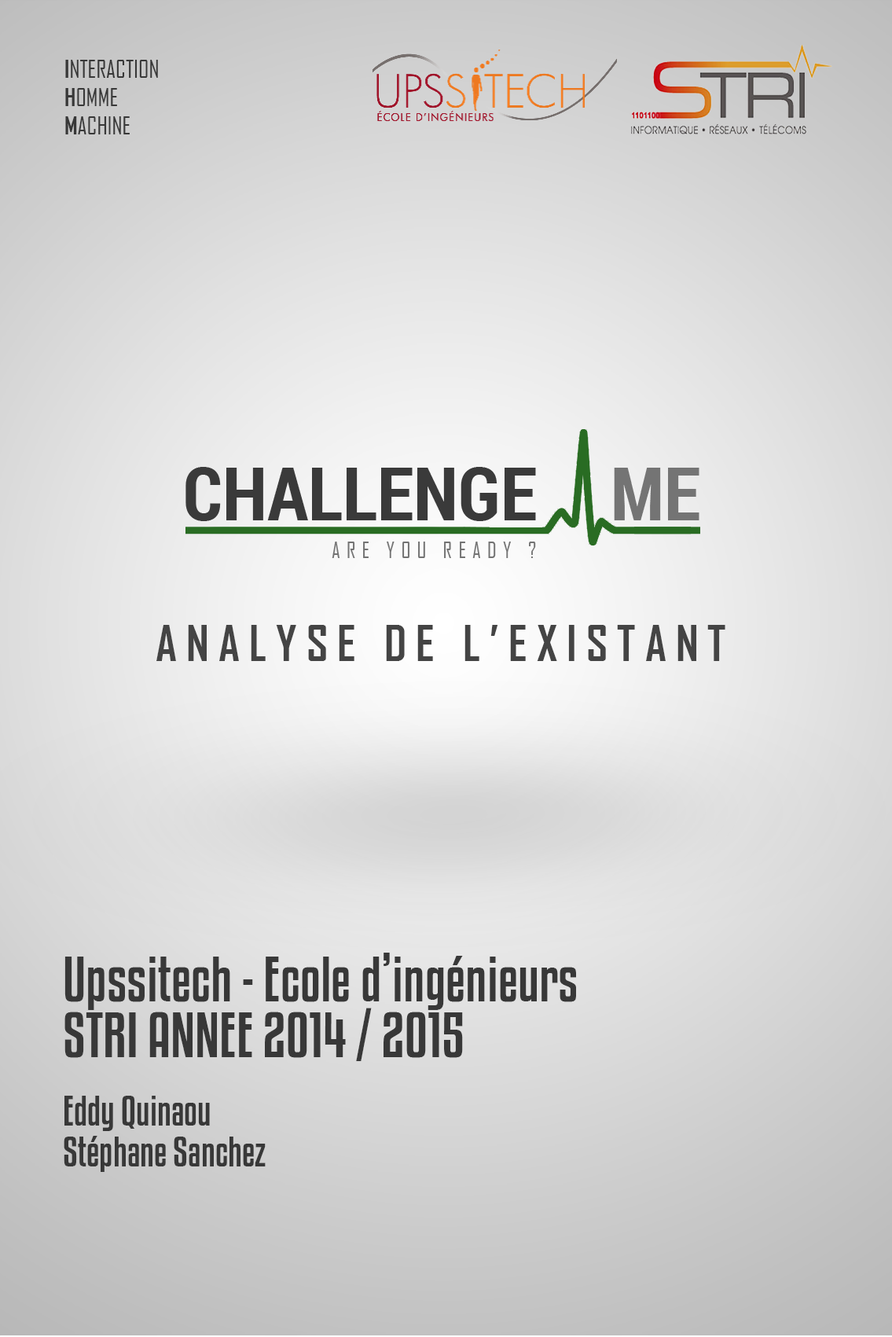
<style>
.page{position:relative;width:892px;height:1337px}
.page>*{position:absolute;margin:0}
.t1{font:23.6px/28.2px "AgencyFB-Reg";color:#383838}
.t2{font:23.6px/28.2px "AgencyFB-Bold";color:#383838}
.t3{font:47.2px "AgencyFB-Bold";letter-spacing:0.2em;color:#444444}
.t4{font:56.6px/55.7px "KenyanCoffeeRg-Regular";color:#383838}
.t5{font:36.9px/40.7px "KenyanCoffeeRg-Regular";color:#383838}
</style>
<div class="page">
<p class="t1" style="left:65px;top:60px;width:93px;height:74px"><span class="t2">I</span>NTERACTION <br><span class="t2">H</span>OMME <br><span class="t2">M</span>ACHINE</p>
<p class="t3" style="left:156px;top:625px;width:569px;height:36px">ANALYSE DE L’EXISTANT</p>
<p class="t4" style="left:64px;top:953px;width:512px;height:108px">Upssitech - Ecole d’ingénieurs<br>STRI ANNEE 2014 / 2015</p>
<p class="t5" style="left:64px;top:1096px;width:202px;height:76px">Eddy Quinaou<br>Stéphane Sanchez</p>
</div>
